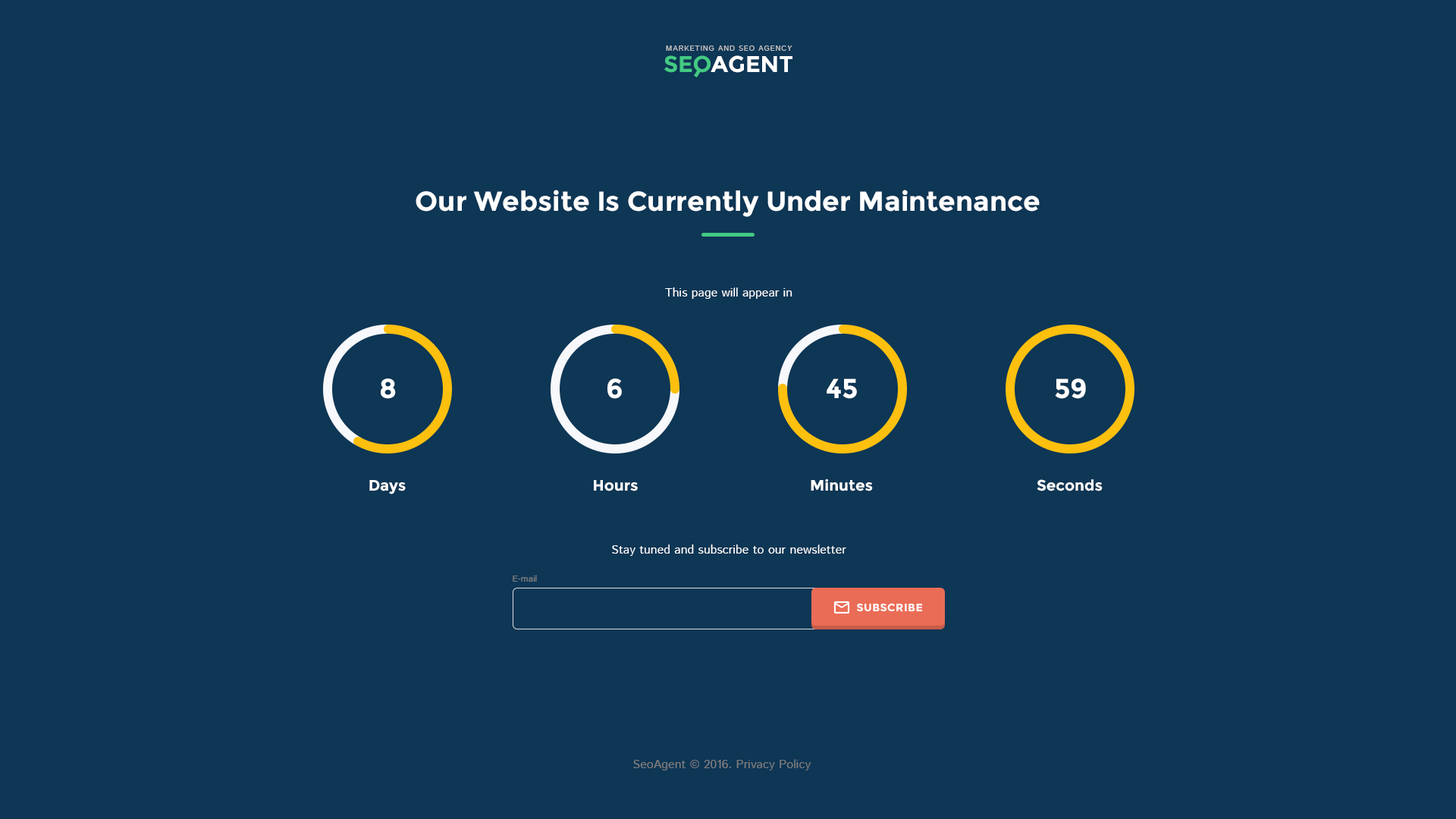
<style>
.page{position:relative;width:1456px;height:819px;background:#0e3655}
.page>*{position:absolute;margin:0}
.t1{font:7.6px "IstokWeb-Regular";letter-spacing:0.08em;color:#c1c1c1;text-transform:uppercase}
.t2{font:22.7px "Montserrat-Bold";color:#43ca83}
.t3{font:22.7px "Montserrat-Bold";color:#ffffff}
.t4{font:27.3px "Montserrat-Bold";color:#ffffff}
.t5{font:12.1px "IstokWeb-Regular";color:#ffffff}
.t6{font:27.3px "Montserrat-Bold";color:#ffffff;text-transform:uppercase}
.t7{font:15.2px "Montserrat-Bold";color:#ffffff}
.t8{font:9.1px "IstokWeb-Regular";color:#7f7f7f}
.t9{font:10.6px "Montserrat-Bold";letter-spacing:0.04em;color:#ffffff;text-transform:uppercase}
.t10{font:12.1px "IstokWeb-Regular";color:#7f7f7f}
</style>
<div class="page">
<p class="t1" style="left:666px;top:45px;width:126px;height:6px">Marketing and SEO agency</p>
<p class="t2" style="left:664px;top:55px;width:47px;height:18px">SEO</p>
<p class="t3" style="left:711px;top:55px;width:81px;height:18px">AGENT</p>
<p class="t4" style="left:416px;top:190px;width:624px;height:27px">Our Website Is Currently Under Maintenance</p>
<p class="t5" style="left:665px;top:287px;width:127px;height:12px">This page will appear in</p>
<p class="t6" style="left:381px;top:378px;width:15px;height:21px">8</p>
<p class="t6" style="left:607px;top:378px;width:15px;height:21px">6</p>
<p class="t6" style="left:827px;top:378px;width:30px;height:21px">45</p>
<p class="t6" style="left:1055px;top:378px;width:31px;height:21px">59</p>
<p class="t7" style="left:369px;top:480px;width:37px;height:14px">Days</p>
<p class="t7" style="left:594px;top:480px;width:44px;height:11px">Hours</p>
<p class="t7" style="left:811px;top:479px;width:62px;height:12px">Minutes</p>
<p class="t7" style="left:1037px;top:479px;width:66px;height:12px">Seconds</p>
<p class="t5" style="left:612px;top:544px;width:234px;height:12px">Stay tuned and subscribe to our newsletter</p>
<p class="t8" style="left:513px;top:575px;width:24px;height:7px">E-mail</p>
<p class="t9" style="left:857px;top:603px;width:66px;height:9px">subscribe</p>
<p class="t10" style="left:633px;top:759px;width:178px;height:11px">SeoAgent © 2016. Privacy Policy</p>
</div>
